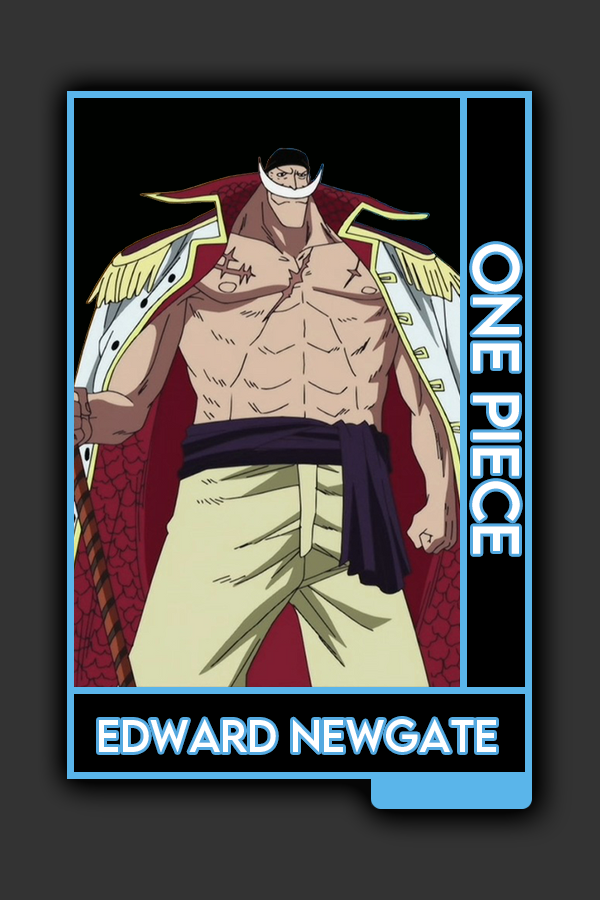
<style>
.page{position:relative;width:600px;height:900px;background:#333333}
.page>*{position:absolute;margin:0}
.t1{font:58.4px "LEMONMILK-Regular";color:#ffffff}
.t2{font:40.6px "LEMONMILK-Regular";color:#ffffff}
</style>
<div class="page">
<p class="t1" style="left:472px;top:244px;width:48px;height:310px;rotate:90deg">One Piece</p>
<p class="t2" style="left:99px;top:719px;width:397px;height:33px">Edward Newgate</p>
</div>
